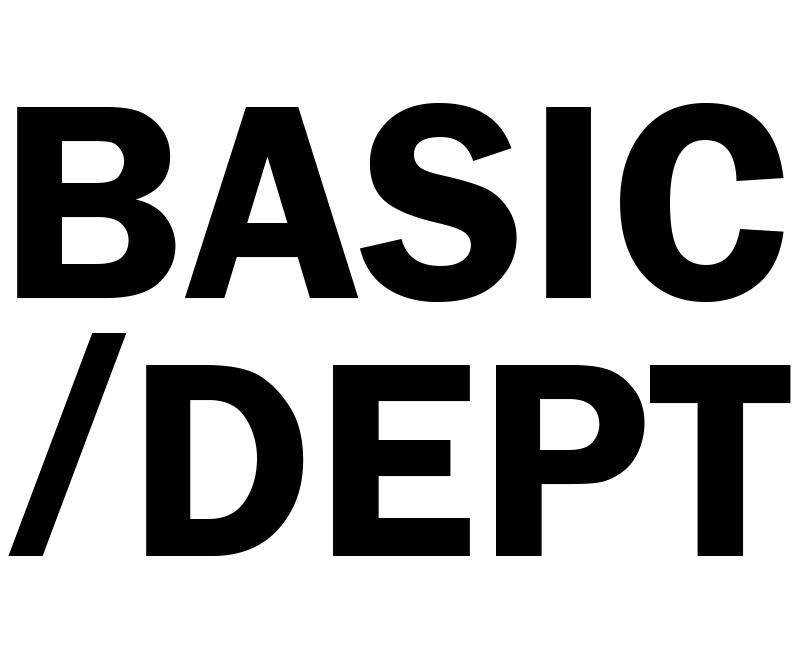
<style>
.page{position:relative;width:800px;height:660px;background:#ffffff}
.page>*{position:absolute;margin:0}
.t1{font:287.1px "FranklinGothic-Demi";color:#000000}
.t2{font:311px "TrebuchetMS-Bold";color:#000000}
</style>
<div class="page">
<p class="t1" style="left:17px;top:103px;width:767px;height:199px">BASIC</p>
<p class="t1" style="left:8px;top:333px;width:783px;height:223px"><span class="t2">/</span>DEPT</p>
</div>
